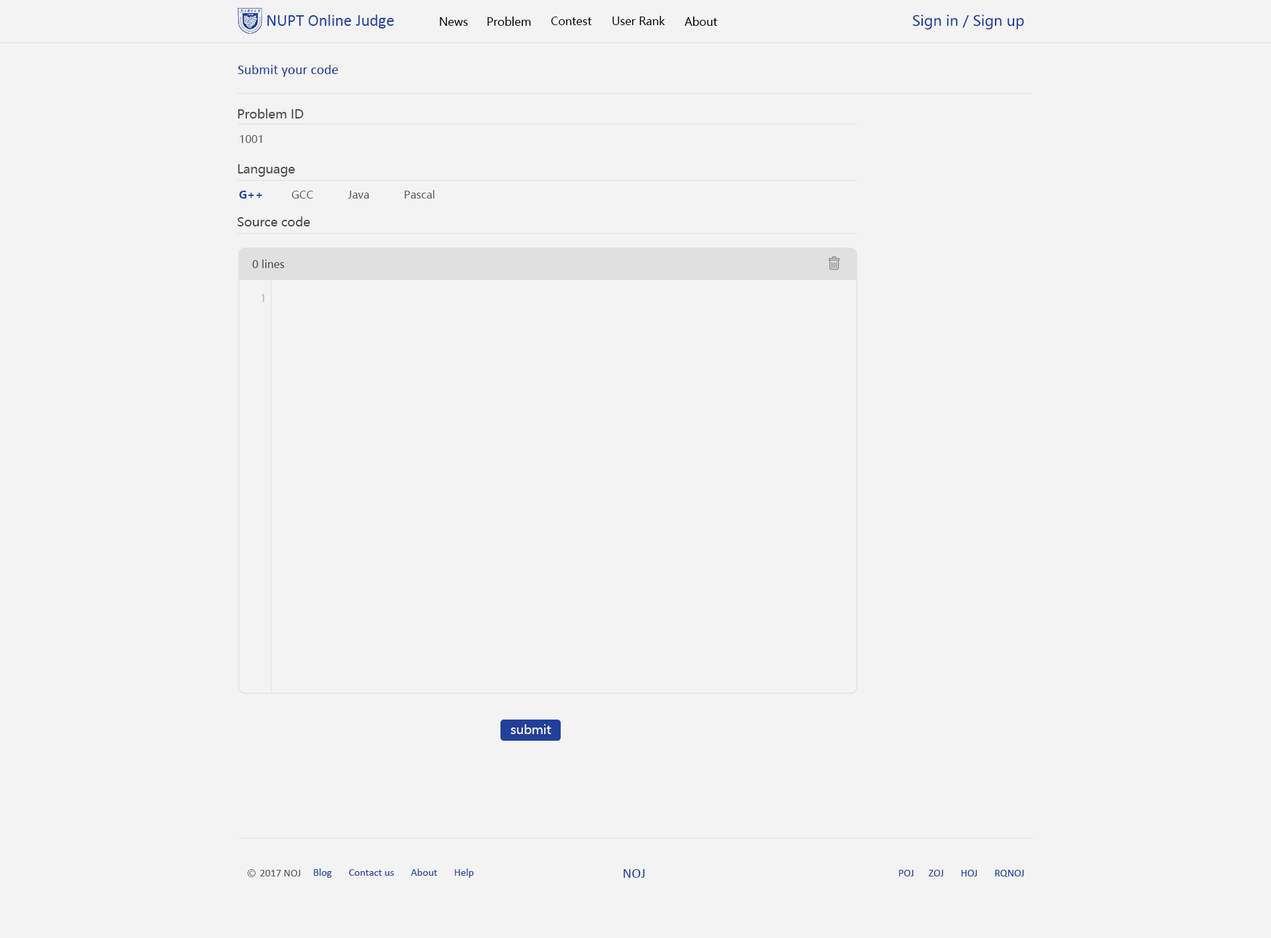
<style>
.page{position:relative;width:1271px;height:938px;background:#f3f3f3}
.page>*{position:absolute;margin:0}
.t1{font:16.6px "Calibri";color:#22409a}
.t2{font:11px "MicrosoftYaHei";color:#000000}
.t3{font:14.1px "MicrosoftYaHei";color:#1a3795}
.t4{font:14.1px "Calibri";color:#22409a}
.t5{font:12.4px "MicrosoftYaHei";color:#4a4a4a}
.t6{font:10.6px "MicrosoftYaHei";color:#5b5b5b}
.t7{font:10.6px "MicrosoftYaHei-Bold";color:#22409a}
.t8{font:10.6px "MicrosoftYaHei";color:#4a4a4a}
.t9{font:10.6px "MicrosoftYaHei";color:#b4b4b4}
.t10{font:12.4px "MicrosoftYaHei";color:#f3f3f3}
.t11{font:10.6px "Calibri";color:#5b5b5b}
.t12{font:10.6px "Calibri";color:#22409a}
</style>
<div class="page">
<p class="t1" style="left:267px;top:15px;width:127px;height:13px">NUPT Online Judge</p>
<p class="t2" style="left:440px;top:17px;width:28px;height:9px">News</p>
<p class="t2" style="left:487px;top:17px;width:44px;height:9px">Problem</p>
<p class="t2" style="left:551px;top:17px;width:41px;height:8px">Contest</p>
<p class="t2" style="left:612px;top:16px;width:53px;height:9px">User Rank</p>
<p class="t2" style="left:685px;top:17px;width:33px;height:9px">About</p>
<p class="t3" style="left:913px;top:15px;width:111px;height:15px">Sign in / Sign up</p>
<p class="t4" style="left:238px;top:65px;width:100px;height:12px">Submit your code</p>
<p class="t5" style="left:238px;top:109px;width:66px;height:10px">Problem ID</p>
<p class="t6" style="left:240px;top:135px;width:22px;height:8px">1001</p>
<p class="t5" style="left:238px;top:164px;width:57px;height:13px">Language</p>
<p class="t6" style="left:239px;top:190px;width:195px;height:9px"><span class="t7">G++</span>         GCC           Java           Pascal</p>
<p class="t5" style="left:238px;top:216px;width:72px;height:10px">Source code</p>
<p class="t8" style="left:252px;top:260px;width:33px;height:8px">0 lines</p>
<p class="t9" style="left:261px;top:294px;width:4px;height:8px">1</p>
<p class="t10" style="left:510px;top:724px;width:41px;height:10px">submit</p>
<p class="t11" style="left:260px;top:870px;width:41px;height:7px">2017 NOJ</p>
<p class="t12" style="left:314px;top:869px;width:160px;height:9px">Blog       Contact us       About       Help</p>
<p class="t4" style="left:624px;top:869px;width:21px;height:9px">NOJ</p>
<p class="t12" style="left:899px;top:870px;width:125px;height:7px">POJ      ZOJ       HOJ       RQNOJ</p>
</div>
